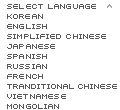
<style>
.page{position:relative;width:120px;height:110px;background:#ffffff}
.page>*{position:absolute;margin:0}
.t1{font:8px "04b21";color:#595959;text-transform:uppercase}
.t2{font:8px "04b21";letter-spacing:-0.025em;color:#595959;text-transform:uppercase}
</style>
<div class="page">
<p class="t1" style="left:7px;top:4px;width:89px;height:5px">Select Language</p>
<p class="t1" style="left:7px;top:14px;width:36px;height:5px">Korean</p>
<p class="t1" style="left:7px;top:24px;width:40px;height:5px">English</p>
<p class="t1" style="left:7px;top:34px;width:99px;height:5px">Simplified Chinese</p>
<p class="t1" style="left:7px;top:44px;width:48px;height:5px">Japanese</p>
<p class="t1" style="left:7px;top:54px;width:40px;height:5px">Spanish</p>
<p class="t1" style="left:7px;top:64px;width:40px;height:5px">Russian</p>
<p class="t1" style="left:7px;top:74px;width:36px;height:5px">French</p>
<p class="t2" style="left:7px;top:84px;width:110px;height:5px">Tranditional Chinese</p>
<p class="t1" style="left:7px;top:94px;width:59px;height:5px">Vietnamese</p>
<p class="t1" style="left:7px;top:104px;width:52px;height:5px">Mongolian</p>
</div>
